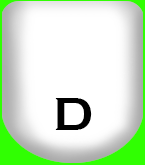
<style>
.page{position:relative;width:145px;height:165px;background:#ffffff}
.page>*{position:absolute;margin:0}
.t1{font:48px "CopperplateGothic-Bold";color:#000000}
</style>
<div class="page">
<p class="t1" style="left:55px;top:98px;width:37px;height:32px">D</p>
</div>
